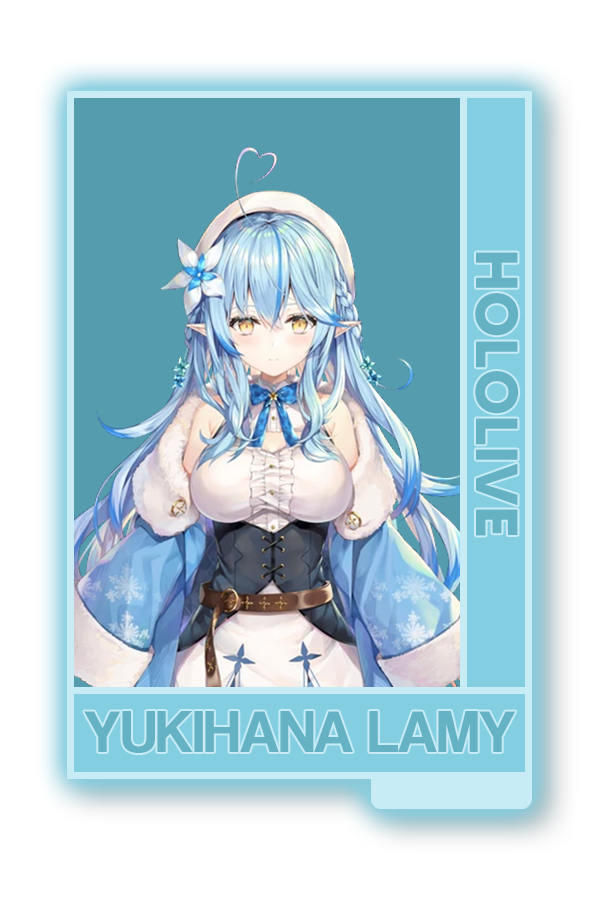
<style>
.page{position:relative;width:600px;height:900px;background:#ffffff}
.page>*{position:absolute;margin:0}
.t1{font:59.2px "MADETOMMY-Bold";color:#66b2c5}
.t2{font:60.5px "CoolveticaRg-Regular";color:#66b2c5}
</style>
<div class="page">
<p class="t1" style="left:475px;top:252px;width:44px;height:284px;rotate:90deg">HOLOLIVE</p>
<p class="t2" style="left:84px;top:711px;width:432px;height:42px">YUKIHANA LAMY</p>
</div>
